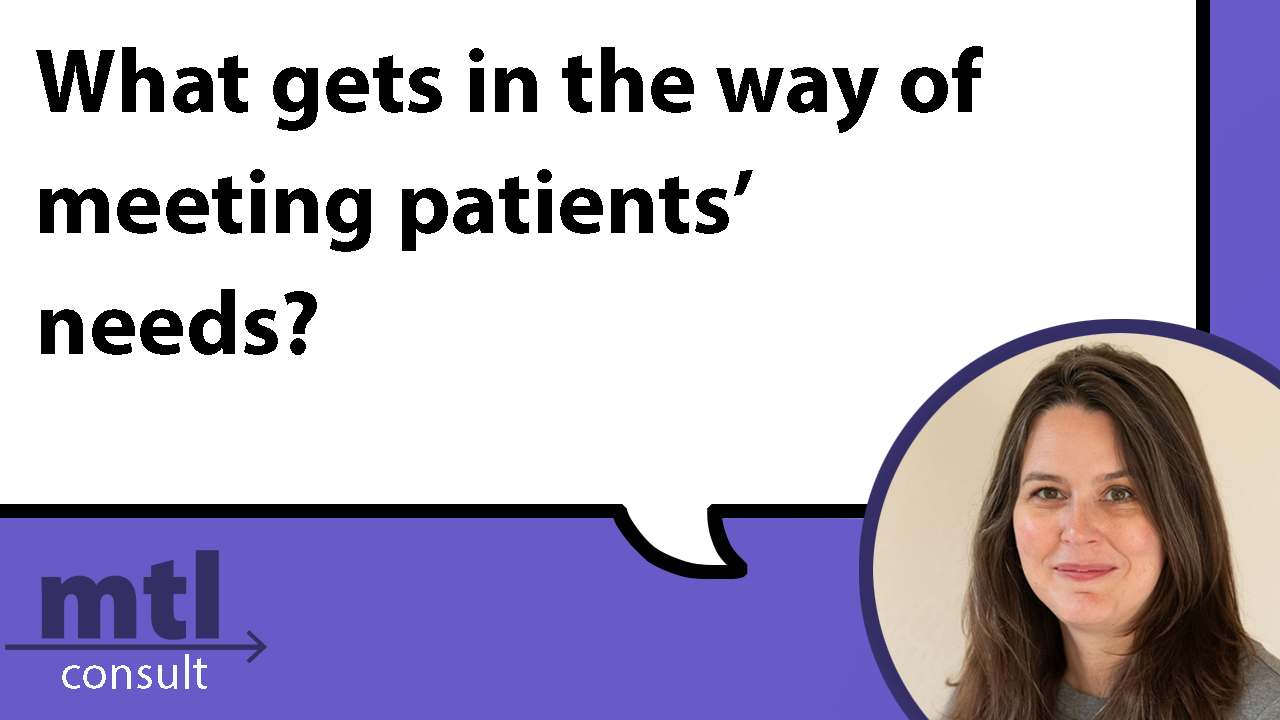
<style>
.page{position:relative;width:1280px;height:720px;background:#ffffff}
.page>*{position:absolute;margin:0}
.t1{font:91.7px "MyriadPro-Bold";color:#000000}
</style>
<div class="page">
<p class="t1" style="left:36px;top:46px;width:947px;height:309px">What gets in the way of<br>meeting patients’<br>needs?</p>
</div>
